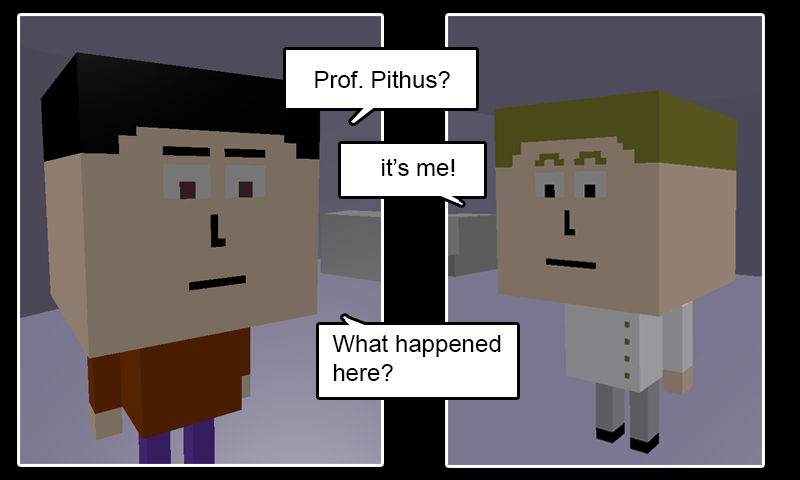
<style>
.page{position:relative;width:800px;height:480px}
.page>*{position:absolute;margin:0}
.t1{font:24px "ArialMT";color:#000000}
.t2{font:24px "ArialMT";color:#010101}
</style>
<div class="page">
<p class="t1" style="left:315px;top:70px;width:135px;height:18px">Prof. Pithus?</p>
<p class="t1" style="left:382px;top:158px;width:73px;height:18px">it’s me!</p>
<p class="t2" style="left:332px;top:334px;width:169px;height:47px">What happened<br>here?</p>
</div>
